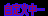
<style>
.page{position:relative;width:48px;height:16px;background:#000000}
.page>*{position:absolute;margin:0}
.t1{font:12px "MuzaiPixel";color:#a80840}
</style>
<div class="page">
<p class="t1" style="left:5px;top:4px;width:39px;height:11px">自定义中…</p>
</div>
